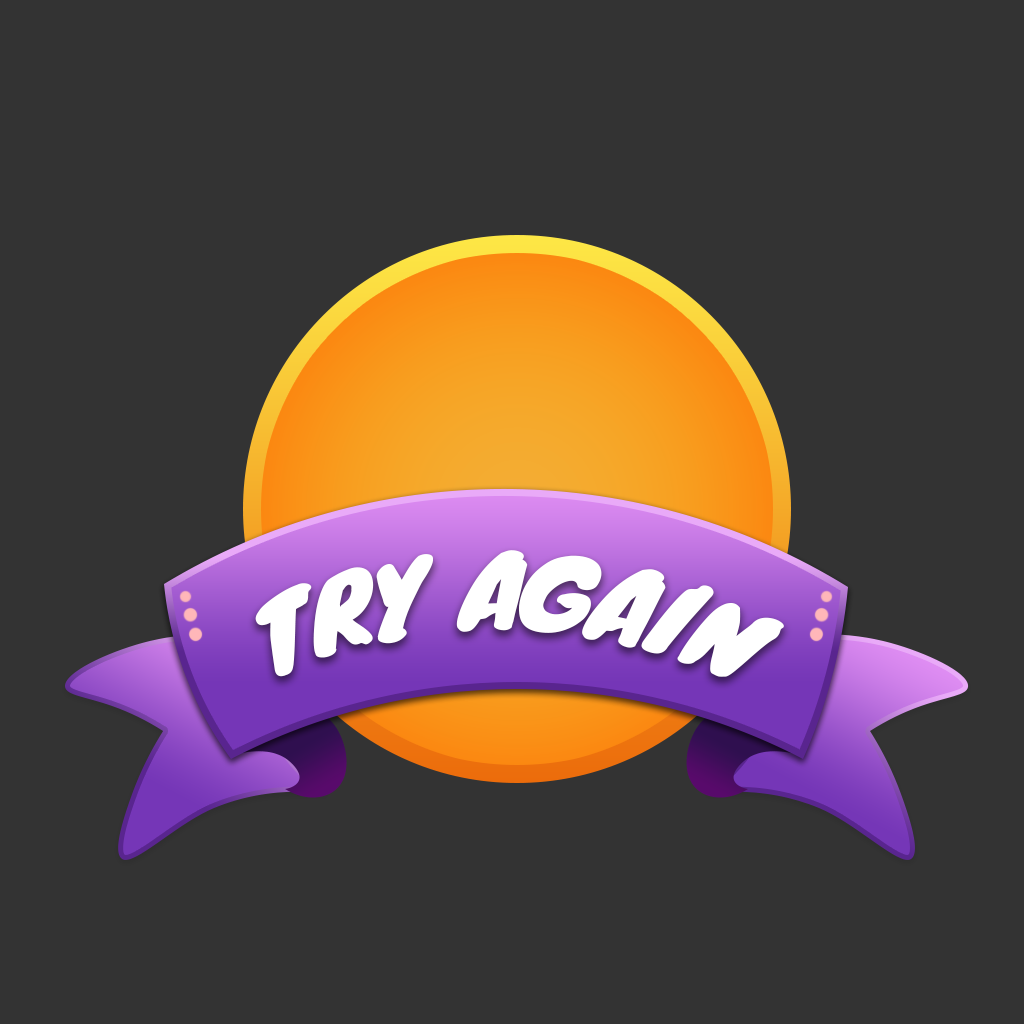
<style>
.page{position:relative;width:1024px;height:1024px;background:#333333}
.page>*{position:absolute;margin:0}
.t1{font:94.9px "Knewave-Regular";color:#ffffff}
</style>
<div class="page">
<p class="t1" style="left:255px;top:550px;width:529px;height:127px;rotate:1deg">TRY AGAIN</p>
</div>
